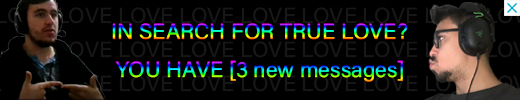
<style>
.page{position:relative;width:520px;height:100px;background:#000000}
.page>*{position:absolute;margin:0}
.t1{font:22px "AcuminConcept-Regular"}
</style>
<div class="page">
<p class="t1" style="left:112px;top:23px;width:296px;height:17px">IN SEARCH FOR TRUE LOVE?</p>
<p class="t1" style="left:115px;top:60px;width:288px;height:22px">YOU HAVE [3 new messages]</p>
</div>
